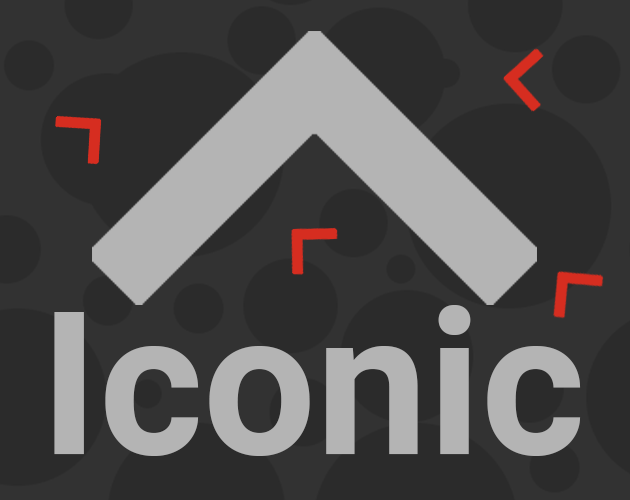
<style>
.page{position:relative;width:630px;height:500px;background:#2b2b2b}
.page>*{position:absolute;margin:0}
.t1{font:200px "Roboto-Bold";color:#b4b4b4}
</style>
<div class="page">
<p class="t1" style="left:54px;top:305px;width:527px;height:151px">Iconic</p>
</div>
